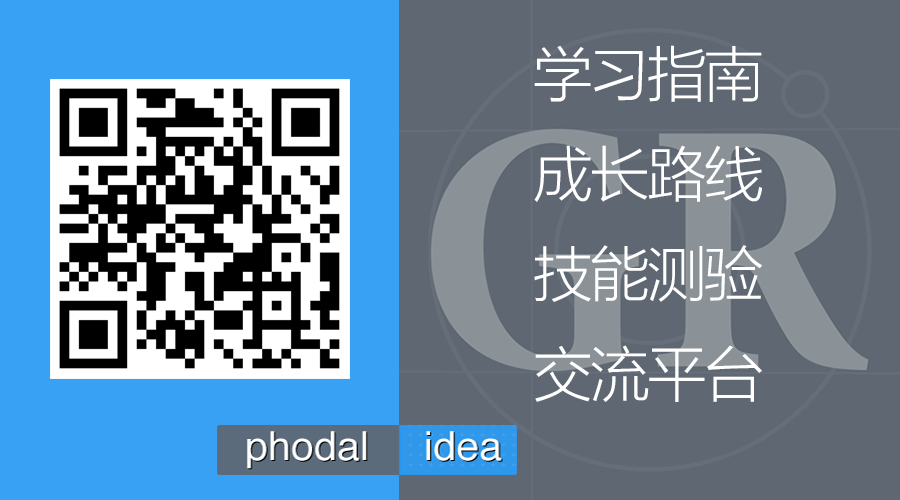
<style>
.page{position:relative;width:900px;height:500px;background:#5e6772}
.page>*{position:absolute;margin:0}
.t1{font:60px "FZLTXHK--GBK1-0";letter-spacing:-0.04em;color:#ffffff}
</style>
<div class="page">
<p class="t1" style="left:534px;top:45px;width:228px;height:57px">学习指南</p>
<p class="t1" style="left:534px;top:145px;width:228px;height:57px">成长路线</p>
<p class="t1" style="left:534px;top:245px;width:228px;height:57px">技能测验</p>
<p class="t1" style="left:535px;top:345px;width:227px;height:57px">交流平台</p>
</div>
